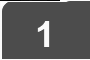
<style>
.page{position:relative;width:90px;height:60px;background:#4c4c4c}
.page>*{position:absolute;margin:0}
.t1{font:36px "Arial-BoldMT";color:#fafafa}
</style>
<div class="page">
<p class="t1" style="left:36px;top:21px;width:13px;height:26px">1</p>
</div>
